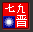
<style>
.page{position:relative;width:33px;height:32px;background:#f20000}
.page>*{position:absolute;margin:0}
.t1{font:10.4px "SimSun";color:#ffffff}
.t2{font:11.7px "SimSun";color:#ffffff}
</style>
<div class="page">
<p class="t1" style="left:5px;top:4px;width:20px;height:9px">七九</p>
<p class="t2" style="left:16px;top:15px;width:11px;height:12px">晋</p>
</div>
